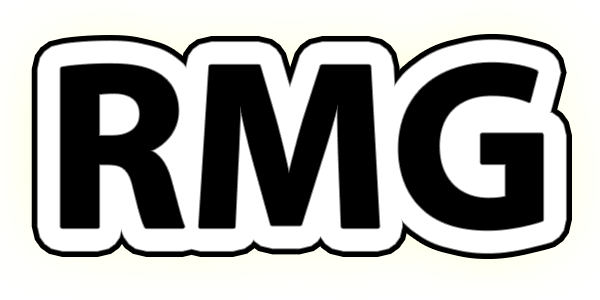
<style>
.page{position:relative;width:600px;height:300px;background:#000000}
.page>*{position:absolute;margin:0}
.t1{font:239.6px "MyriadPro-Bold";color:#000000}
</style>
<div class="page">
<p class="t1" style="left:61px;top:63px;width:481px;height:166px">RMG</p>
</div>
